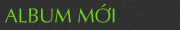
<style>
.page{position:relative;width:180px;height:30px;background:#313131}
.page>*{position:absolute;margin:0}
.t1{font:20px "UVNNhan";color:#6cd51f}
</style>
<div class="page">
<p class="t1" style="left:5px;top:3px;width:110px;height:20px">ALBUM MỚI</p>
</div>
